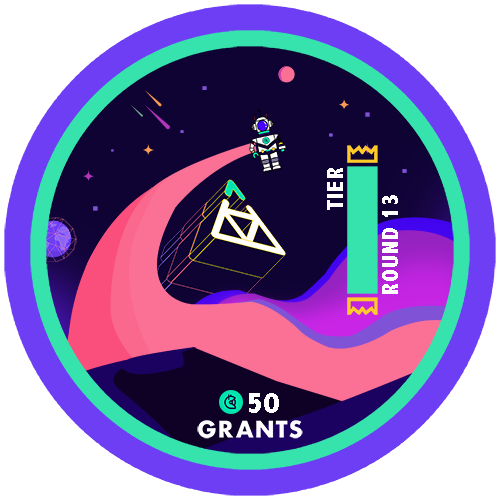
<style>
.page{position:relative;width:500px;height:500px;background:#ffffff}
.page>*{position:absolute;margin:0}
.t1{font:23.7px "AbadiMT-CondensedExtraBold";letter-spacing:0.05em;color:#ffffff}
.t2{font:30.9px "AbadiMT-CondensedExtraBold";letter-spacing:0.05em;color:#ffffff}
</style>
<div class="page">
<p class="t1" style="left:327px;top:168px;width:16px;height:42px;rotate:-90deg">TIER</p>
<p class="t1" style="left:382px;top:195px;width:16px;height:99px;rotate:-90deg">ROUND 13</p>
<p class="t2" style="left:249px;top:393px;width:30px;height:20px">50</p>
</div>
